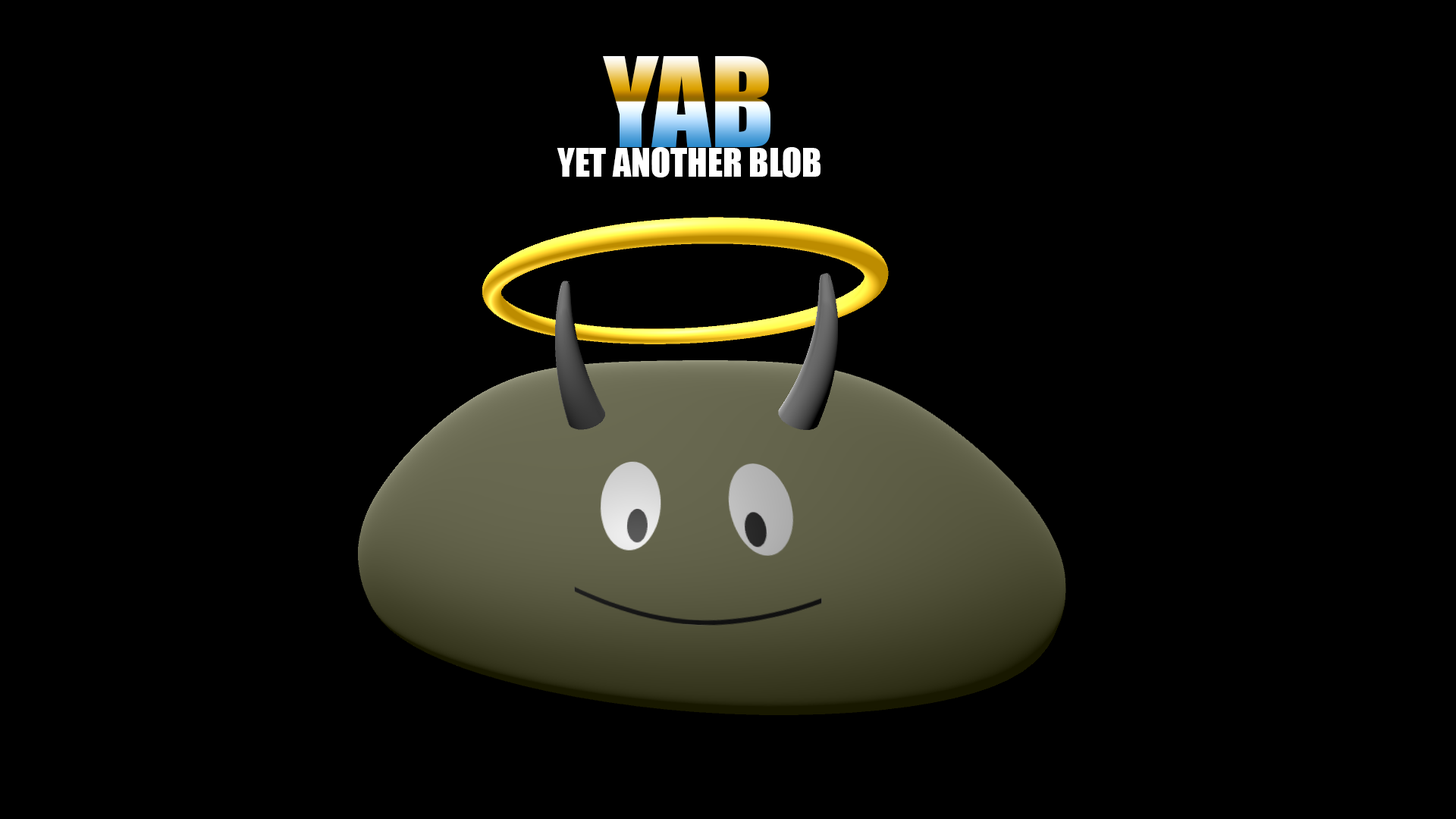
<style>
.page{position:relative;width:1456px;height:819px;background:#000000}
.page>*{position:absolute;margin:0}
.t1{font:115.3px "Impact"}
.t2{font:36.4px "Impact";color:#ffffff}
</style>
<div class="page">
<p class="t1" style="left:603px;top:56px;width:167px;height:91px">YAB</p>
<p class="t2" style="left:557px;top:147px;width:264px;height:30px">YET ANOTHER BLOB</p>
</div>
